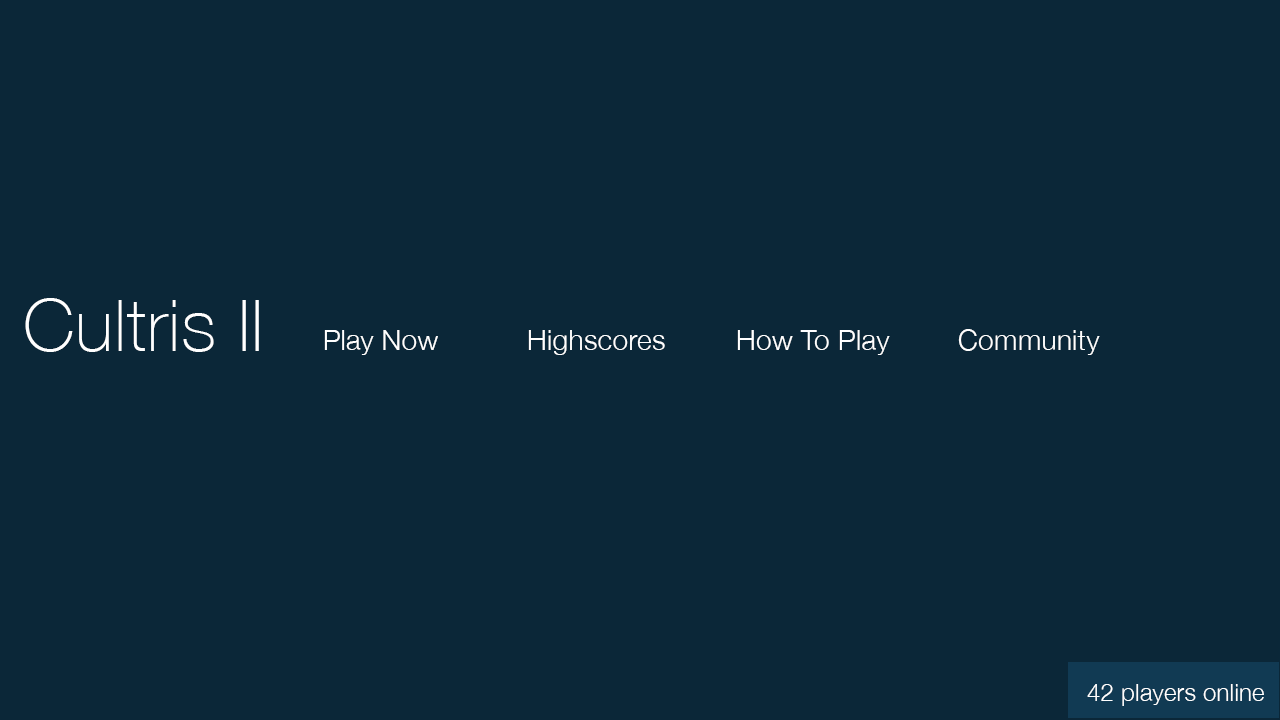
<style>
.page{position:relative;width:1280px;height:720px;background:#0b2738}
.page>*{position:absolute;margin:0}
.t1{font:72px "HelveticaNeue-Thin";letter-spacing:0.01em;color:#ffffff}
.t2{font:28.1px "HelveticaNeue-Light";letter-spacing:0.01em;color:#ffffff}
.t3{font:28.2px "HelveticaNeue-Light";color:#ffffff}
.t4{font:24px "HelveticaNeue-Light";letter-spacing:0.01em;color:#ffffff}
</style>
<div class="page">
<p class="t1" style="left:25px;top:298px;width:234px;height:54px">Cultris II</p>
<p class="t2" style="left:958px;top:329px;width:142px;height:26px">Community</p>
<p class="t3" style="left:324px;top:330px;width:114px;height:25px">Play Now</p>
<p class="t2" style="left:528px;top:330px;width:137px;height:25px">Highscores</p>
<p class="t2" style="left:737px;top:330px;width:153px;height:25px">How To Play</p>
<p class="t4" style="left:1087px;top:684px;width:177px;height:22px">42 players online</p>
</div>
